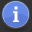
<style>
.page{position:relative;width:32px;height:32px;background:#333333}
.page>*{position:absolute;margin:0}
.t1{font:20.3px "LucidaFax-Demi";letter-spacing:0.01em;color:#ffffff}
</style>
<div class="page">
<p class="t1" style="left:13px;top:6px;width:6px;height:16px">i</p>
</div>
